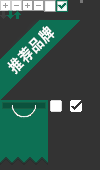
<style>
.page{position:relative;width:100px;height:170px;background:#333333}
.page>*{position:absolute;margin:0}
.t1{font:16px "STHeitiSC-Medium";color:#fcfdfd;font-weight:bold;scale:0.89 1}
</style>
<div class="page">
<p class="t1" style="left:7px;top:26px;width:48px;height:49px;rotate:-45deg">推荐品牌</p>
</div>
